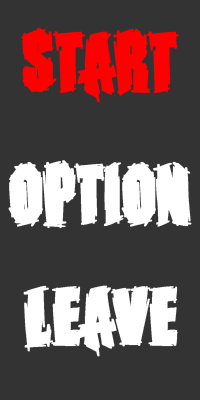
<style>
.page{position:relative;width:200px;height:400px;background:#333333}
.page>*{position:absolute;margin:0}
.t1{font:66.7px "GhostArmorRegular";color:#ff0000;font-weight:bold;scale:0.85 1}
.t2{font:66.7px "GhostArmorRegular";color:#ffffff;font-weight:bold;scale:0.85 1}
</style>
<div class="page">
<p class="t1" style="left:21px;top:27px;width:158px;height:76px">Start</p>
<p class="t2" style="left:8px;top:160px;width:184px;height:69px">Option</p>
<p class="t2" style="left:23px;top:285px;width:155px;height:72px">Leave</p>
</div>
